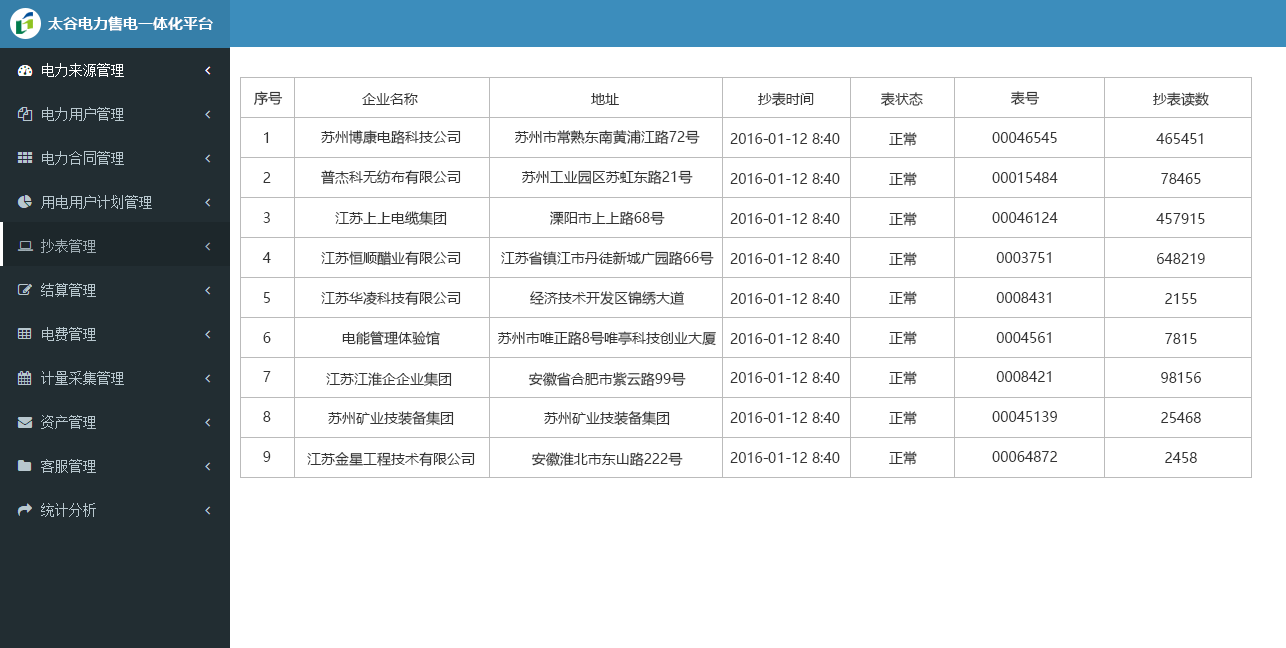
<style>
.page{position:relative;width:1286px;height:648px;background:#ffffff}
.page>*{position:absolute;margin:0}
.t1{font:15px "MicrosoftYaHei-Bold";color:#ffffff}
.t2{font:14px "MicrosoftYaHei";color:#333333}
</style>
<div class="page">
<p class="t1" style="left:48px;top:16px;width:165px;height:15px">太谷电力售电一体化平台</p>
<p class="t2" style="left:254px;top:91px;width:29px;height:14px">序号</p>
<p class="t2" style="left:362px;top:93px;width:56px;height:12px">企业名称</p>
<p class="t2" style="left:591px;top:93px;width:28px;height:12px">地址</p>
<p class="t2" style="left:758px;top:92px;width:56px;height:14px">抄表时间</p>
<p class="t2" style="left:881px;top:92px;width:42px;height:14px">表状态</p>
<p class="t2" style="left:1011px;top:91px;width:29px;height:14px">表号</p>
<p class="t2" style="left:1153px;top:92px;width:56px;height:15px">抄表读数</p>
<p class="t2" style="left:264px;top:132px;width:5px;height:11px">1</p>
<p class="t2" style="left:321px;top:130px;width:140px;height:15px">苏州博康电路科技公司</p>
<p class="t2" style="left:515px;top:130px;width:185px;height:15px">苏州市常熟东南黄浦江路72号</p>
<p class="t2" style="left:730px;top:133px;width:110px;height:11px">2016-01-12 8:40</p>
<p class="t2" style="left:889px;top:132px;width:28px;height:14px">正常</p>
<p class="t2" style="left:992px;top:132px;width:65px;height:11px">00046545</p>
<p class="t2" style="left:1156px;top:133px;width:47px;height:11px">465451</p>
<p class="t2" style="left:263px;top:172px;width:8px;height:11px">2</p>
<p class="t2" style="left:321px;top:170px;width:140px;height:15px">普杰科无纺布有限公司</p>
<p class="t2" style="left:522px;top:170px;width:171px;height:15px">苏州工业园区苏虹东路21号</p>
<p class="t2" style="left:730px;top:173px;width:110px;height:11px">2016-01-12 8:40</p>
<p class="t2" style="left:889px;top:172px;width:28px;height:14px">正常</p>
<p class="t2" style="left:992px;top:172px;width:66px;height:11px">00015484</p>
<p class="t2" style="left:1161px;top:173px;width:40px;height:11px">78465</p>
<p class="t2" style="left:263px;top:212px;width:7px;height:11px">3</p>
<p class="t2" style="left:335px;top:211px;width:112px;height:15px">江苏上上电缆集团</p>
<p class="t2" style="left:550px;top:211px;width:115px;height:15px">溧阳市上上路68号</p>
<p class="t2" style="left:730px;top:213px;width:110px;height:11px">2016-01-12 8:40</p>
<p class="t2" style="left:889px;top:212px;width:28px;height:14px">正常</p>
<p class="t2" style="left:992px;top:212px;width:66px;height:11px">00046124</p>
<p class="t2" style="left:1156px;top:213px;width:49px;height:11px">457915</p>
<p class="t2" style="left:262px;top:252px;width:9px;height:11px">4</p>
<p class="t2" style="left:321px;top:251px;width:140px;height:15px">江苏恒顺醋业有限公司</p>
<p class="t2" style="left:501px;top:251px;width:213px;height:15px">江苏省镇江市丹徒新城广园路66号</p>
<p class="t2" style="left:730px;top:253px;width:110px;height:11px">2016-01-12 8:40</p>
<p class="t2" style="left:889px;top:252px;width:28px;height:14px">正常</p>
<p class="t2" style="left:996px;top:252px;width:55px;height:11px">0003751</p>
<p class="t2" style="left:1157px;top:253px;width:48px;height:11px">648219</p>
<p class="t2" style="left:263px;top:292px;width:7px;height:11px">5</p>
<p class="t2" style="left:321px;top:291px;width:140px;height:15px">江苏华凌科技有限公司</p>
<p class="t2" style="left:530px;top:291px;width:154px;height:14px">经济技术开发区锦绣大道</p>
<p class="t2" style="left:730px;top:293px;width:110px;height:11px">2016-01-12 8:40</p>
<p class="t2" style="left:889px;top:291px;width:28px;height:14px">正常</p>
<p class="t2" style="left:996px;top:292px;width:55px;height:11px">0008431</p>
<p class="t2" style="left:1165px;top:293px;width:32px;height:11px">2155</p>
<p class="t2" style="left:263px;top:332px;width:8px;height:11px">6</p>
<p class="t2" style="left:342px;top:331px;width:98px;height:15px">电能管理体验馆</p>
<p class="t2" style="left:498px;top:331px;width:218px;height:15px">苏州市唯正路8号唯亭科技创业大厦</p>
<p class="t2" style="left:730px;top:333px;width:110px;height:11px">2016-01-12 8:40</p>
<p class="t2" style="left:889px;top:331px;width:28px;height:14px">正常</p>
<p class="t2" style="left:996px;top:332px;width:55px;height:11px">0004561</p>
<p class="t2" style="left:1165px;top:333px;width:32px;height:11px">7815</p>
<p class="t2" style="left:263px;top:371px;width:8px;height:11px">7</p>
<p class="t2" style="left:326px;top:372px;width:126px;height:15px">江苏江淮企企业集团</p>
<p class="t2" style="left:528px;top:372px;width:158px;height:15px">安徽省合肥市紫云路99号</p>
<p class="t2" style="left:730px;top:372px;width:110px;height:11px">2016-01-12 8:40</p>
<p class="t2" style="left:889px;top:371px;width:28px;height:14px">正常</p>
<p class="t2" style="left:996px;top:371px;width:55px;height:11px">0008421</p>
<p class="t2" style="left:1161px;top:372px;width:40px;height:11px">98156</p>
<p class="t2" style="left:263px;top:411px;width:8px;height:11px">8</p>
<p class="t2" style="left:328px;top:411px;width:126px;height:15px">苏州矿业技装备集团</p>
<p class="t2" style="left:544px;top:411px;width:126px;height:15px">苏州矿业技装备集团</p>
<p class="t2" style="left:730px;top:412px;width:110px;height:11px">2016-01-12 8:40</p>
<p class="t2" style="left:889px;top:411px;width:28px;height:14px">正常</p>
<p class="t2" style="left:992px;top:411px;width:65px;height:11px">00045139</p>
<p class="t2" style="left:1161px;top:412px;width:40px;height:11px">25468</p>
<p class="t2" style="left:263px;top:451px;width:8px;height:11px">9</p>
<p class="t2" style="left:307px;top:452px;width:168px;height:15px">江苏金星工程技术有限公司</p>
<p class="t2" style="left:531px;top:452px;width:152px;height:15px">安徽淮北市东山路222号</p>
<p class="t2" style="left:730px;top:452px;width:110px;height:11px">2016-01-12 8:40</p>
<p class="t2" style="left:889px;top:451px;width:28px;height:14px">正常</p>
<p class="t2" style="left:992px;top:451px;width:66px;height:11px">00064872</p>
<p class="t2" style="left:1165px;top:452px;width:32px;height:11px">2458</p>
</div>
